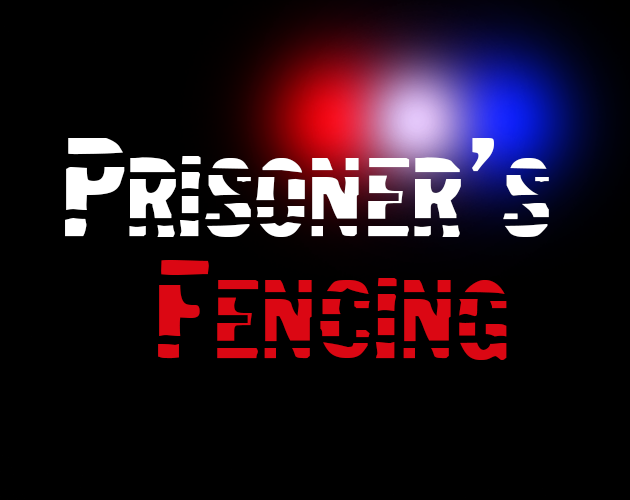
<style>
.page{position:relative;width:630px;height:500px;background:#000000}
.page>*{position:absolute;margin:0}
.t1{font:101.7px "Jailbird";color:#ffffff}
.t2{font:101.7px "Jailbird";color:#db0713}
</style>
<div class="page">
<p class="t1" style="left:65px;top:138px;width:484px;height:222px;text-align:center">Prisoner's<br> <span class="t2">Fencing</span></p>
</div>
